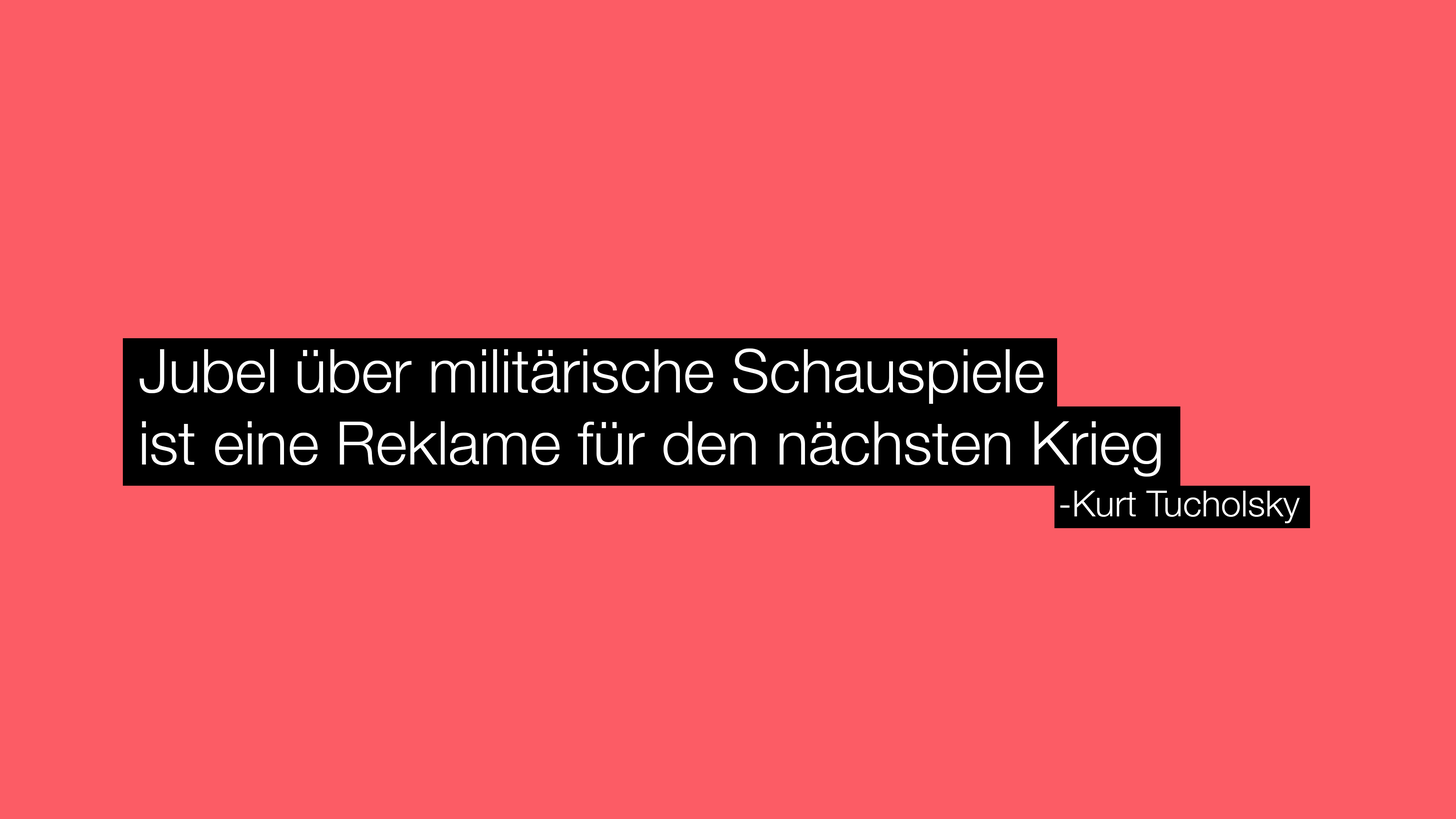
<style>
.page{position:relative;width:1456px;height:819px;background:#fc5c65}
.page>*{position:absolute;margin:0}
.t1{font:60.2px "HelveticaNeue-Light";color:#ffffff}
.t2{font:36.1px "HelveticaNeue-Light";color:#ffffff}
</style>
<div class="page">
<p class="t1" style="left:140px;top:348px;width:1021px;height:129px">Jubel über militärische Schauspiele<br>ist eine Reklame für den nächsten Krieg</p>
<p class="t2" style="left:1060px;top:491px;width:240px;height:32px">-Kurt Tucholsky</p>
</div>
